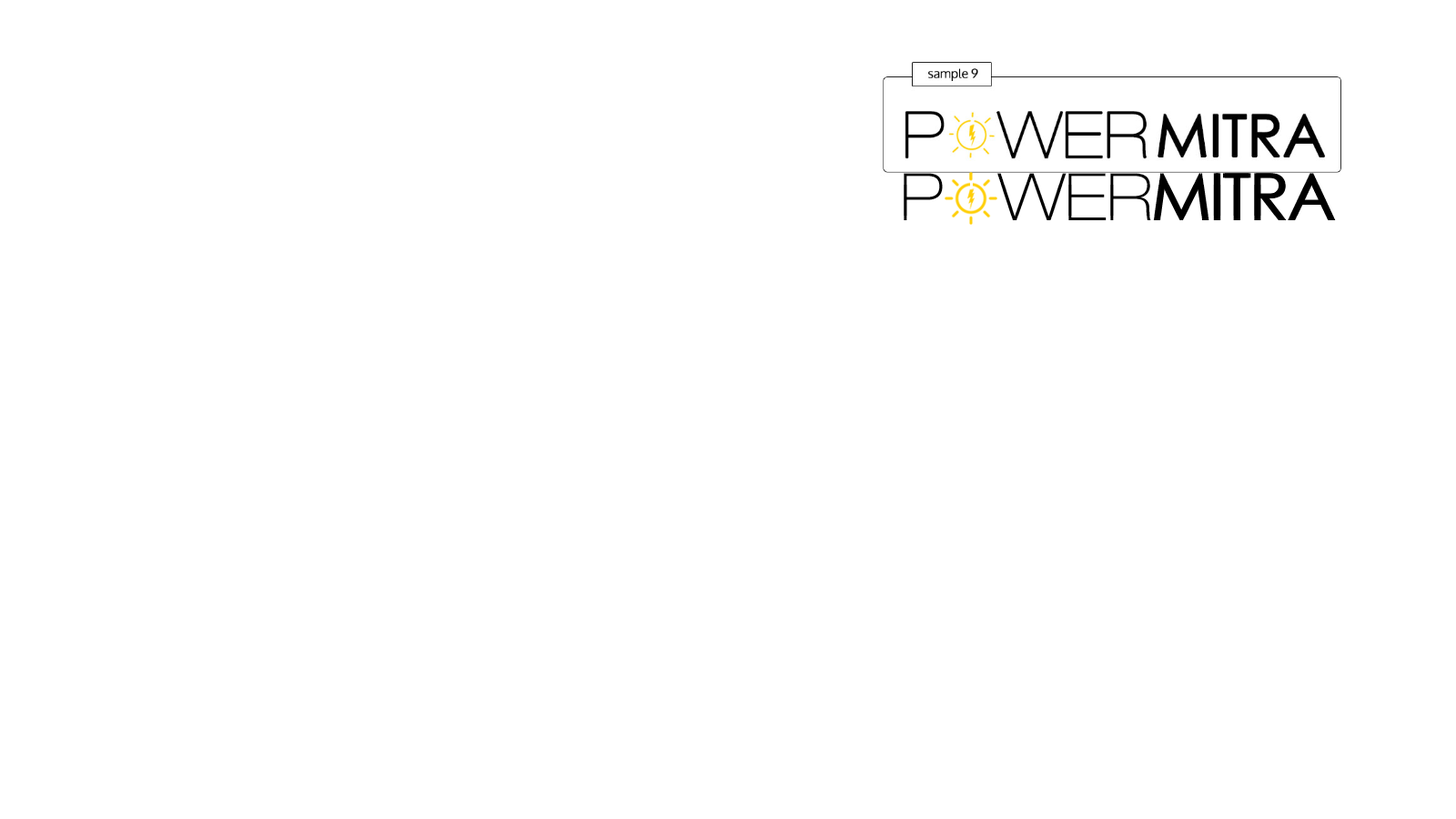
<style>
.page{position:relative;width:1456px;height:819px;background:#ffffff}
.page>*{position:absolute;margin:0}
.t1{font:65.5px "HelveticaNeueLT-ThinExt";letter-spacing:-0.01em;color:#000000;text-transform:uppercase}
.t2{font:65.5px "CenturyGothic";letter-spacing:-0.025em;color:#000000;text-transform:uppercase}
</style>
<div class="page">
<p class="t1" style="left:904px;top:173px;width:247px;height:47px">P    wer</p>
<p class="t2" style="left:1153px;top:173px;width:181px;height:47px">Mitra</p>
<p class="t2" style="left:1155px;top:173px;width:181px;height:47px">Mitra</p>
</div>
